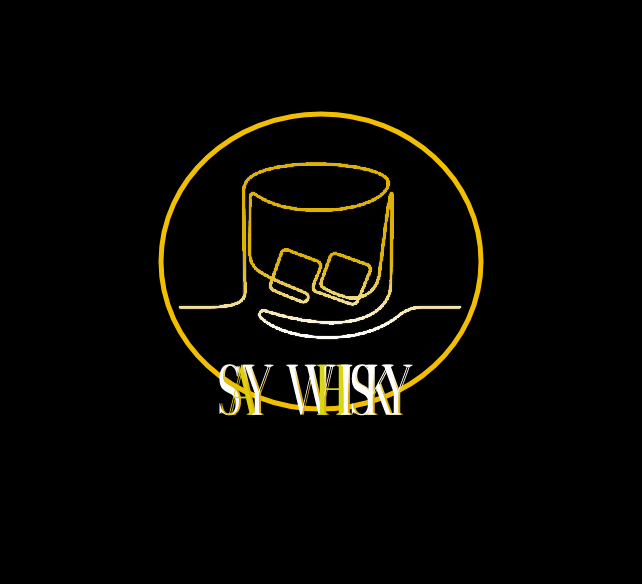
<style>
.page{position:relative;width:642px;height:584px;background:#000000}
.page>*{position:absolute;margin:0}
.t1{font:71.4px "AngleciaProDisplay";letter-spacing:-0.327em;color:#ffffff;scale:0.57 1}
.t2{font:71.4px "AngleciaProDisplay";letter-spacing:-0.355em;color:#dece0c;scale:0.57 1}
.t3{font:71.4px "AngleciaProDisplay";letter-spacing:-0.473em;color:#ffffff;scale:0.57 1}
.t4{font:71.4px "AngleciaProDisplay";letter-spacing:-0.44em;color:#ffffff;scale:0.57 1}
.t5{font:71.4px "AngleciaProDisplay";letter-spacing:-0.158em;color:#d7d716;scale:0.57 1}
.t6{font:71.4px "AngleciaProDisplay";letter-spacing:-0.044em;color:#ffffff;scale:0.57 1}
.t7{font:71.4px "AngleciaProDisplay";letter-spacing:-0.201em;color:#ffffff;scale:0.57 1}
.t8{font:71.4px "AngleciaProDisplay";letter-spacing:-0.287em;color:#ffffff;scale:0.57 1}
.t9{font:71.4px "AngleciaProDisplay";letter-spacing:-0.021em;color:#ffffff;scale:0.57 1}
</style>
<div class="page">
<p class="t1" style="left:219px;top:364px;width:192px;height:52px">S<span class="t2">A</span><span class="t3">Y  </span><span class="t4">W</span><span class="t5">H</span><span class="t6">I</span><span class="t7">S</span><span class="t8">K</span><span class="t9">Y</span></p>
</div>
